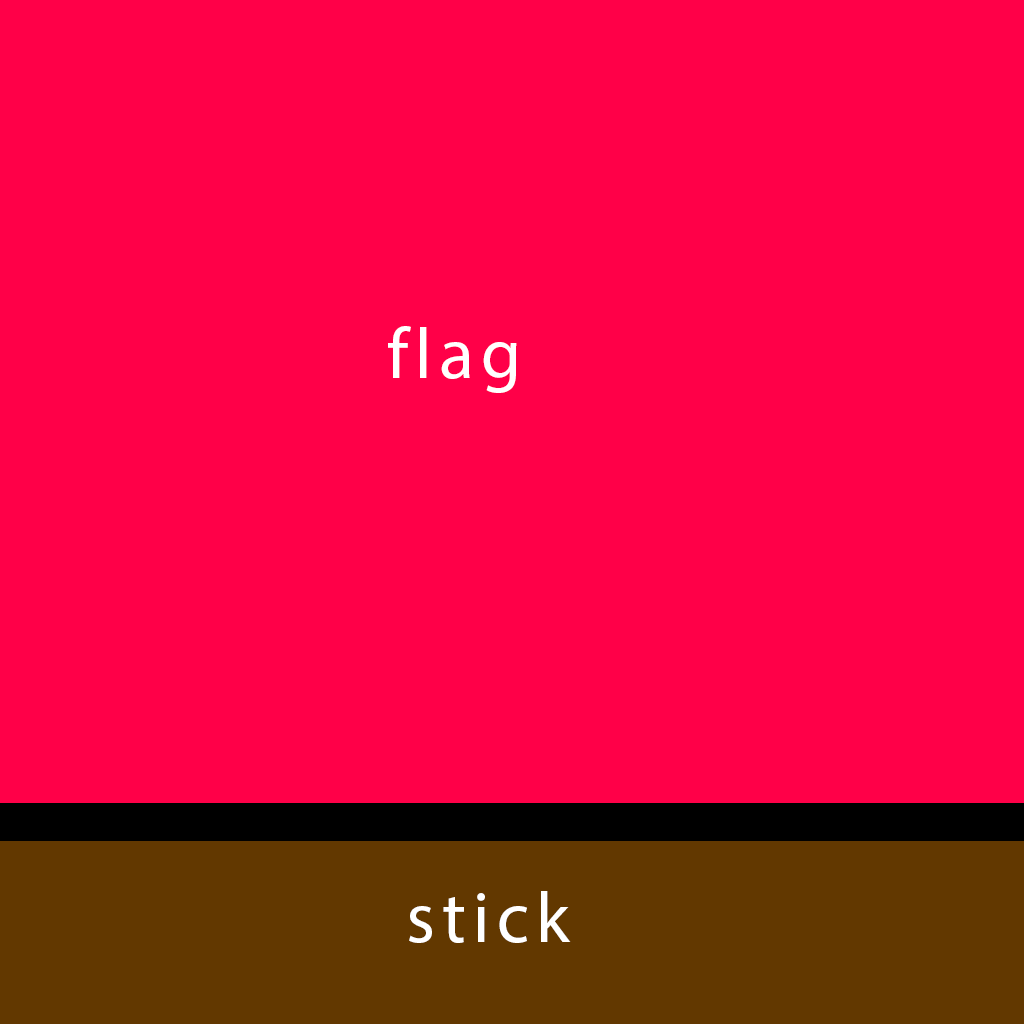
<style>
.page{position:relative;width:1024px;height:1024px;background:#ff0048}
.page>*{position:absolute;margin:0}
.t1{font:72px "MyriadHebrew-Regular";letter-spacing:0.1em;color:#ffffff}
</style>
<div class="page">
<p class="t1" style="left:388px;top:326px;width:129px;height:67px">flag</p>
<p class="t1" style="left:409px;top:891px;width:162px;height:52px">stick</p>
</div>
